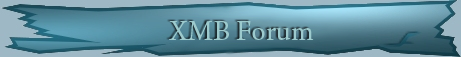
<style>
.page{position:relative;width:461px;height:57px}
.page>*{position:absolute;margin:0}
.t1{font:30px "ArnoPro-Regular";color:#9dcacd}
</style>
<div class="page">
<p class="t1" style="left:169px;top:21px;width:145px;height:19px">XMB Forum</p>
</div>
